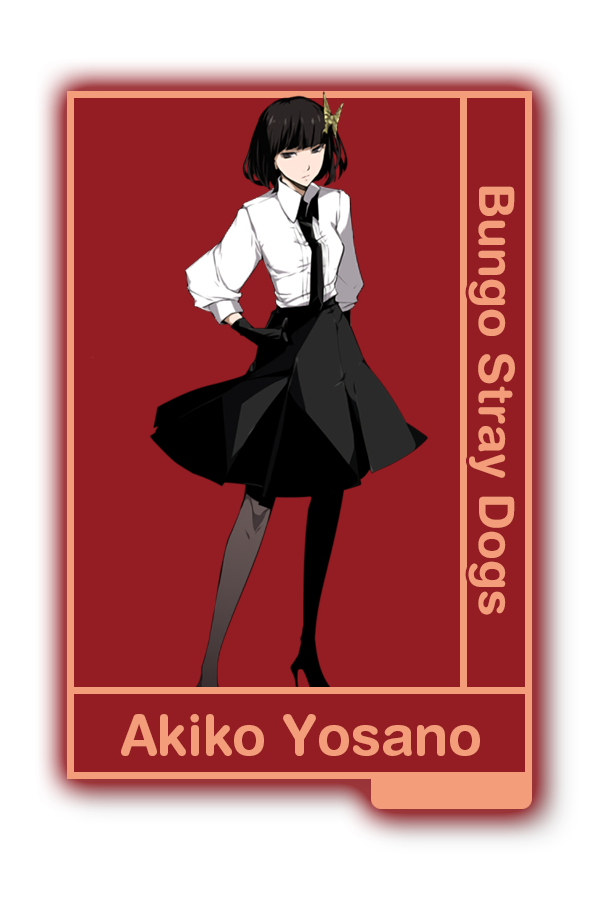
<style>
.page{position:relative;width:600px;height:900px;background:#941d23}
.page>*{position:absolute;margin:0}
.t1{font:48.8px "HelveticaRounded-Bold";color:#f39d7b}
.t2{font:55.4px "HelveticaRounded-Bold";color:#f39d7b}
</style>
<div class="page">
<p class="t1" style="left:468px;top:186px;width:47px;height:429px;rotate:90deg">Bungo Stray Dogs</p>
<p class="t2" style="left:121px;top:714px;width:359px;height:42px">Akiko Yosano</p>
</div>
